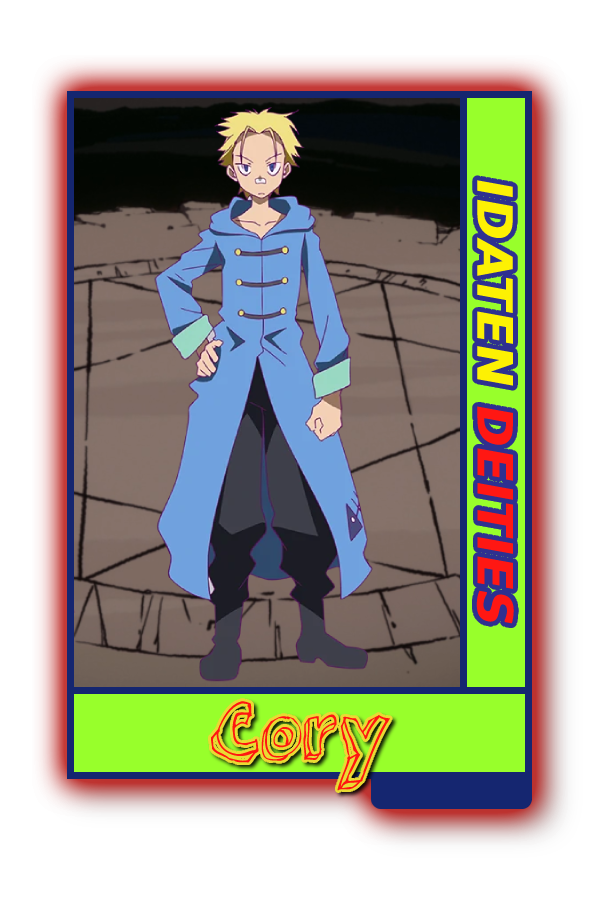
<style>
.page{position:relative;width:600px;height:900px;background:#ffffff}
.page>*{position:absolute;margin:0}
.t1{font:48.8px "MADETOMMY-Bold";color:#ff1713;font-weight:bold;font-style:italic}
.t2{font:48.8px "MADETOMMY-Bold";color:#fdf103;font-weight:bold;font-style:italic}
.t3{font:75px "3dumb";color:#ff1611}
</style>
<div class="page">
<p class="t1" style="left:476px;top:180px;width:38px;height:444px;rotate:90deg"><span class="t2">IDATEN </span>DEITIES</p>
<p class="t3" style="left:210px;top:701px;width:180px;height:90px">Cory</p>
</div>
